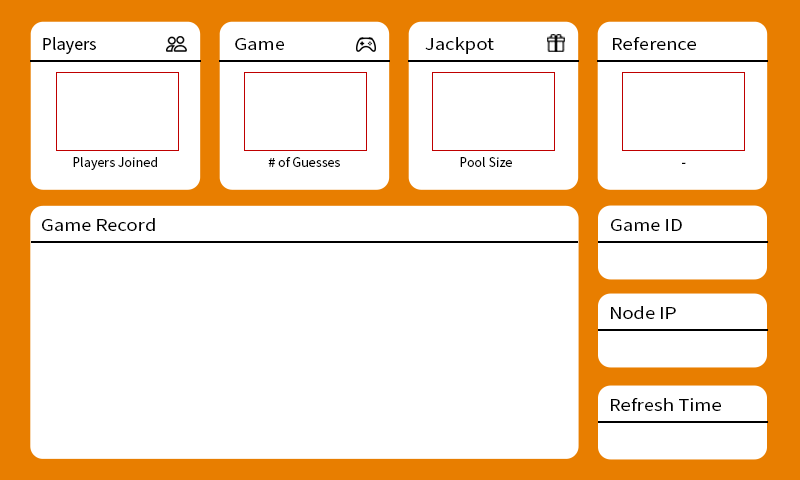
<style>
.page{position:relative;width:800px;height:480px;background:#ffffff}
.page>*{position:absolute;margin:0}
.t1{font:18px "SourceSansPro-Regular";color:#000000}
.t2{font:18px "SourceSansPro-Regular";color:#000000;scale:1.15 1}
.t3{font:14px "SourceSansPro-Regular";color:#000000}
</style>
<div class="page">
<p class="t1" style="left:43px;top:37px;width:53px;height:17px">Players</p>
<p class="t2" style="left:235px;top:38px;width:49px;height:12px">Game</p>
<p class="t2" style="left:425px;top:37px;width:69px;height:17px">Jackpot</p>
<p class="t2" style="left:613px;top:37px;width:83px;height:13px">Reference</p>
<p class="t3" style="left:73px;top:157px;width:84px;height:13px">Players Joined</p>
<p class="t3" style="left:268px;top:157px;width:72px;height:10px"># of Guesses</p>
<p class="t3" style="left:460px;top:157px;width:52px;height:10px">Pool Size</p>
<p class="t3" style="left:682px;top:162px;width:4px;height:2px">-</p>
<p class="t2" style="left:42px;top:218px;width:113px;height:13px">Game Record</p>
<p class="t2" style="left:611px;top:219px;width:71px;height:12px">Game ID</p>
<p class="t2" style="left:611px;top:306px;width:65px;height:13px">Node IP</p>
<p class="t2" style="left:611px;top:398px;width:110px;height:13px">Refresh Time</p>
</div>
